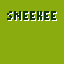
<style>
.page{position:relative;width:64px;height:64px;background:#8bac0f}
.page>*{position:absolute;margin:0}
.t1{font:14px "Pixelated";color:#0f380f}
</style>
<div class="page">
<p class="t1" style="left:7px;top:11px;width:49px;height:9px">SNEEKEE</p>
</div>
